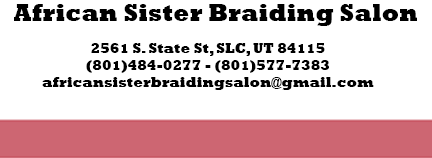
<style>
.page{position:relative;width:432px;height:158px;background:#ffffff}
.page>*{position:absolute;margin:0}
.t1{font:24px "Rockwell-ExtraBold";color:#000000}
.t2{font:14px "Rockwell-ExtraBold";color:#000000}
</style>
<div class="page">
<p class="t1" style="left:14px;top:4px;width:403px;height:22px">African Sister Braiding Salon</p>
<p class="t2" style="left:42px;top:43px;width:332px;height:47px;text-align:center">2561 S. State St, SLC, UT 84115<br>(801)484-0277 - (801)577-7383<br>africansisterbraidingsalon@gmail.com</p>
</div>
